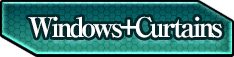
<style>
.page{position:relative;width:234px;height:57px}
.page>*{position:absolute;margin:0}
.t1{font:27px "RyuminPro-ExBold";letter-spacing:-0.12em;color:#ffffff}
</style>
<div class="page">
<p class="t1" style="left:28px;top:16px;width:194px;height:22px">Windows+Curtains</p>
</div>
